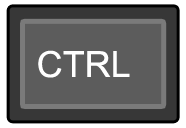
<style>
.page{position:relative;width:186px;height:128px;background:#5c5c5c}
.page>*{position:absolute;margin:0}
.t1{font:36px "ArialMT";color:#ffffff}
</style>
<div class="page">
<p class="t1" style="left:38px;top:50px;width:92px;height:28px">CTRL</p>
</div>
